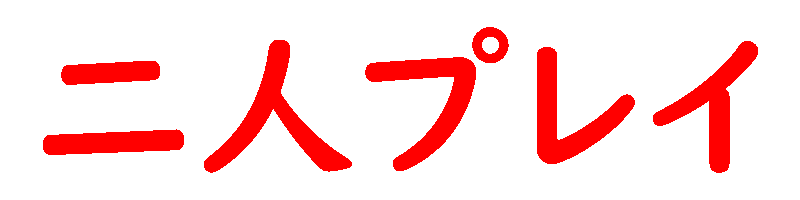
<style>
.page{position:relative;width:800px;height:200px;background:#ffffff}
.page>*{position:absolute;margin:0}
.t1{font:161.6px "UDDigiKyokashoNK-B";color:#ff0000}
</style>
<div class="page">
<p class="t1" style="left:43px;top:27px;width:715px;height:146px">二人プレイ</p>
</div>
